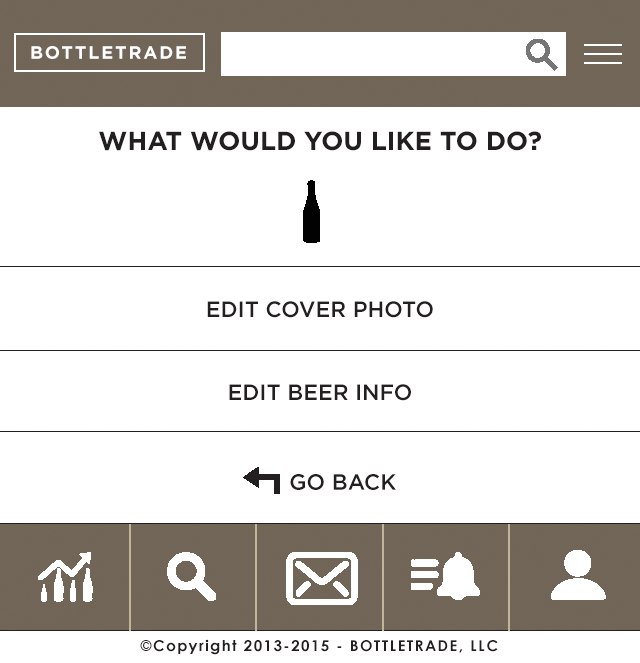
<style>
.page{position:relative;width:640px;height:663px;background:#ffffff}
.page>*{position:absolute;margin:0}
.t1{font:18px "Gotham-Bold";letter-spacing:0.099em;color:#ffffff}
.t2{font:26px "Gotham-Bold";color:#231f20}
.t3{font:22px "Gotham-Medium";color:#231f20}
.t4{font:15px "CenturyGothic-Bold";letter-spacing:0.099em;color:#231f20}
</style>
<div class="page">
<p class="t1" style="left:31px;top:46px;width:155px;height:13px">BOTTLETRADE</p>
<p class="t2" style="left:99px;top:131px;width:442px;height:20px">WHAT WOULD YOU LIKE TO DO?</p>
<p class="t3" style="left:207px;top:301px;width:226px;height:17px">EDIT COVER PHOTO</p>
<p class="t3" style="left:229px;top:384px;width:182px;height:17px">EDIT BEER INFO</p>
<p class="t3" style="left:290px;top:474px;width:106px;height:16px">GO BACK</p>
<p class="t4" style="left:140px;top:639px;width:358px;height:16px">©Copyright 2013-2015 - BOTTLETRADE, LLC</p>
</div>
